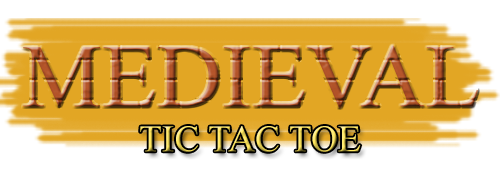
<style>
.page{position:relative;width:500px;height:180px;background:#ffffff}
.page>*{position:absolute;margin:0}
.t1{font:90px "TimesNewRomanPSMT"}
</style>
<div class="page">
<p class="t1" style="left:23px;top:45px;width:455px;height:63px">MEDIEVAL</p>
</div>
